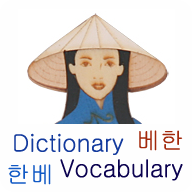
<style>
.page{position:relative;width:192px;height:192px;background:#fefefe}
.page>*{position:absolute;margin:0}
.t1{font:24px "Gulim";color:#133a9d}
.t2{font:24px "Gulim";color:#a2280b}
.t3{font:24px "Gulim";color:#0b0250}
.t4{font:24px "Gulim";color:#1159c5}
</style>
<div class="page">
<p class="t1" style="left:14px;top:133px;width:110px;height:22px">Dictionary</p>
<p class="t2" style="left:139px;top:130px;width:44px;height:21px">베한</p>
<p class="t3" style="left:60px;top:159px;width:123px;height:22px">Vocabulary</p>
<p class="t4" style="left:8px;top:164px;width:43px;height:21px">한베</p>
</div>
